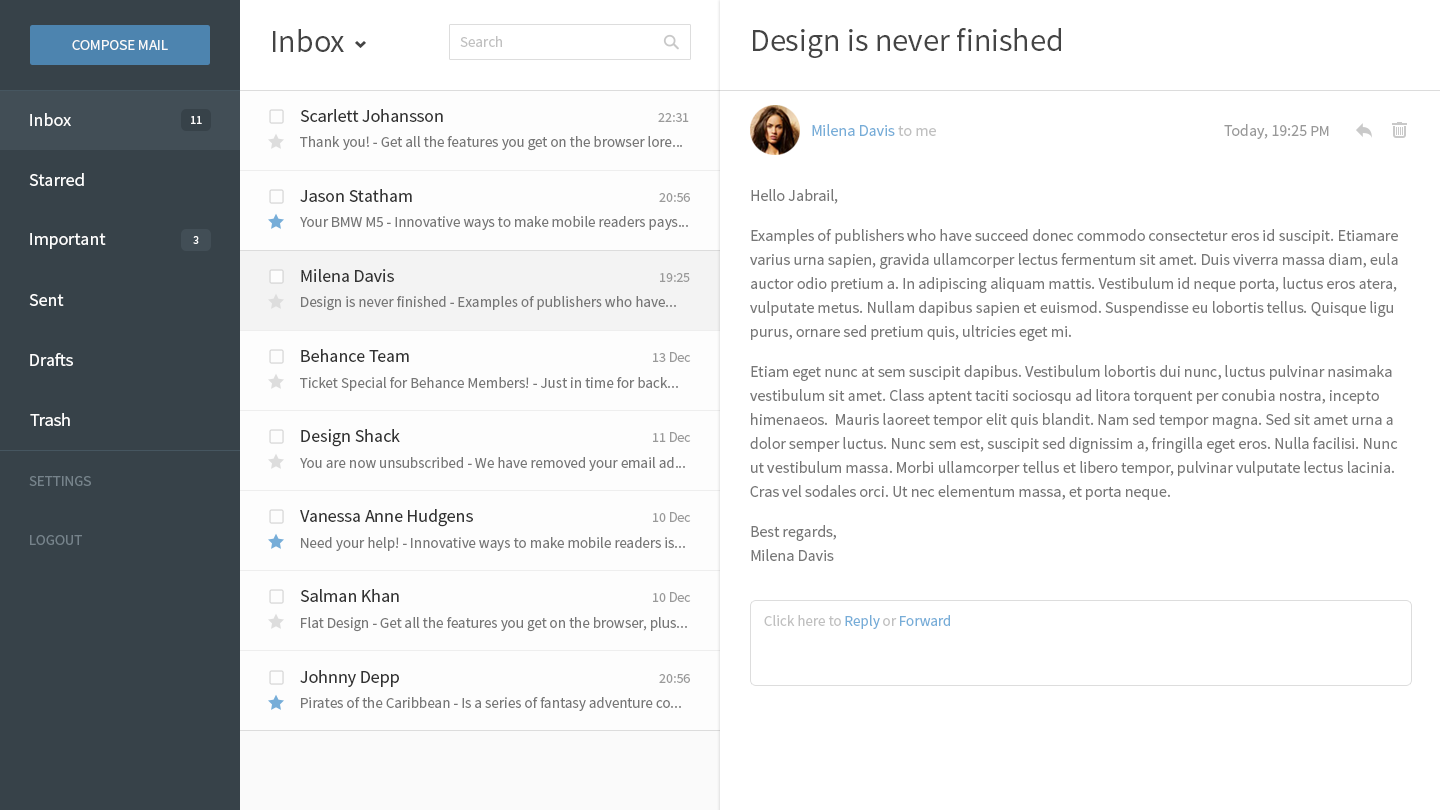
<style>
.page{position:relative;width:1440px;height:810px;background:#ffffff}
.page>*{position:absolute;margin:0}
.t1{font:32px "SourceSansPro-Regular";color:#444444}
.t2{font:15px "SourceSansPro-Regular";color:#fafafa;text-transform:uppercase}
.t3{font:15px "SourceSansPro-Regular";color:#c0c0c0}
.t4{font:18px "SourceSansPro-Regular";color:#fdfdfd}
.t5{font:18px "SourceSansPro-Regular";color:#333333}
.t6{font:14px "SourceSansPro-Regular";color:#999999}
.t7{font:12px "SourceSansPro-Regular";color:#fdfdfd}
.t8{font:16px "SourceSansPro-Regular";color:#76add8}
.t9{font:16px "SourceSansPro-Regular";color:#c0c0c0}
.t10{font:16px "SourceSansPro-Regular";color:#999999}
.t11{font:15px "SourceSansPro-Regular";color:#999999}
.t12{font:15px "SourceSansPro-Regular";color:#777777}
.t13{font:16px/24px "SourceSansPro-Regular";color:#777777}
.t14{font:16px/40px "SourceSansPro-Regular";color:#777777}
.t15{font:15px "SourceSansPro-Regular";color:#76838b;text-transform:uppercase}
.t16{font:15px "SourceSansPro-Regular";color:#76add8}
</style>
<div class="page">
<p class="t1" style="left:273px;top:29px;width:71px;height:23px">Inbox</p>
<p class="t1" style="left:753px;top:28px;width:308px;height:30px">Design is never finished</p>
<p class="t2" style="left:72px;top:40px;width:96px;height:10px">Compose mail</p>
<p class="t3" style="left:460px;top:36px;width:42px;height:11px">Search</p>
<p class="t4" style="left:30px;top:113px;width:41px;height:13px">Inbox</p>
<p class="t5" style="left:300px;top:109px;width:143px;height:13px">Scarlett Johansson</p>
<p class="t6" style="left:658px;top:113px;width:31px;height:9px">22:31</p>
<p class="t7" style="left:191px;top:116px;width:11px;height:8px">11</p>
<p class="t8" style="left:812px;top:124px;width:124px;height:12px">Milena Davis <span class="t9">to me</span></p>
<p class="t10" style="left:1224px;top:124px;width:105px;height:15px">Today, 19:25 <span class="t11">PM</span></p>
<p class="t12" style="left:300px;top:136px;width:382px;height:15px">Thank you! - Get all the features you get on the browser lore...</p>
<p class="t4" style="left:29px;top:173px;width:55px;height:13px">Starred</p>
<p class="t5" style="left:300px;top:189px;width:112px;height:13px">Jason Statham</p>
<p class="t6" style="left:659px;top:193px;width:31px;height:9px">20:56</p>
<p class="t13" style="left:750px;top:189px;width:648px;height:372px">Hello Jabrail,<br><span class="t14">Examples of publishers who have succeed donec commodo consectetur eros id suscipit. Etiamare </span>varius urna sapien, gravida ullamcorper lectus fermentum sit amet. Duis viverra massa diam, eula auctor odio pretium a. In adipiscing aliquam mattis. Vestibulum id neque porta, luctus eros atera, vulputate metus. Nullam dapibus sapien et euismod. Suspendisse eu lobortis tellus. Quisque ligu purus, ornare sed pretium quis, ultricies eget mi.<br><span class="t14">Etiam eget nunc at sem suscipit dapibus. Vestibulum lobortis dui nunc, luctus pulvinar </span>nasimaka vestibulum sit amet. Class aptent taciti sociosqu ad litora torquent per conubia nostra, incepto himenaeos.  Mauris laoreet tempor elit quis blandit. Nam sed tempor magna. Sed sit amet urna a dolor semper luctus. Nunc sem est, suscipit sed dignissim a, fringilla eget eros. Nulla facilisi. Nunc ut vestibulum massa. Morbi ullamcorper tellus et libero tempor, pulvinar vulputate lectus lacinia. Cras vel sodales orci. Ut nec elementum massa, et porta neque.<br><span class="t14">Best regards,<br></span>Milena Davis</p>
<p class="t12" style="left:300px;top:216px;width:388px;height:14px">Your BMW M5 - Innovative ways to make mobile readers pays...</p>
<p class="t4" style="left:30px;top:233px;width:76px;height:16px">Important</p>
<p class="t7" style="left:193px;top:236px;width:6px;height:8px">3</p>
<p class="t5" style="left:301px;top:269px;width:93px;height:13px">Milena Davis</p>
<p class="t6" style="left:660px;top:273px;width:30px;height:9px">19:25</p>
<p class="t4" style="left:29px;top:294px;width:35px;height:12px">Sent</p>
<p class="t12" style="left:301px;top:296px;width:375px;height:15px">Design is never finished - Examples of publishers who have...</p>
<p class="t4" style="left:30px;top:353px;width:43px;height:13px">Drafts</p>
<p class="t5" style="left:301px;top:349px;width:108px;height:13px">Behance Team</p>
<p class="t6" style="left:653px;top:352px;width:38px;height:10px">13 Dec</p>
<p class="t12" style="left:300px;top:377px;width:378px;height:14px">Ticket Special for Behance Members! - Just in time for back...</p>
<p class="t4" style="left:30px;top:413px;width:40px;height:13px">Trash</p>
<p class="t5" style="left:301px;top:429px;width:99px;height:18px">Design Shack</p>
<p class="t6" style="left:653px;top:432px;width:38px;height:10px">11 Dec</p>
<p class="t12" style="left:300px;top:457px;width:385px;height:14px">You are now unsubscribed - We have removed your email ad...</p>
<p class="t15" style="left:29px;top:476px;width:62px;height:10px">Settings</p>
<p class="t5" style="left:300px;top:509px;width:173px;height:18px">Vanessa Anne Hudgens</p>
<p class="t6" style="left:653px;top:512px;width:38px;height:10px">10 Dec</p>
<p class="t15" style="left:30px;top:535px;width:52px;height:10px">logout</p>
<p class="t12" style="left:301px;top:537px;width:384px;height:14px">Need your help! - Innovative ways to make mobile readers is...</p>
<p class="t5" style="left:300px;top:589px;width:99px;height:13px">Salman Khan</p>
<p class="t6" style="left:653px;top:592px;width:38px;height:10px">10 Dec</p>
<p class="t12" style="left:301px;top:617px;width:386px;height:15px">Flat Design - Get all the features you get on the browser, plus...</p>
<p class="t3" style="left:764px;top:615px;width:186px;height:14px">Click here to <span class="t16">Reply</span> or <span class="t16">Forward</span></p>
<p class="t5" style="left:300px;top:670px;width:99px;height:17px">Johnny Depp</p>
<p class="t6" style="left:659px;top:674px;width:31px;height:9px">20:56</p>
<p class="t12" style="left:301px;top:697px;width:380px;height:14px">Pirates of the Caribbean - Is a series of fantasy adventure co...</p>
</div>
